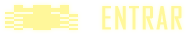
<style>
.page{position:relative;width:193px;height:35px;background:#fff79a}
.page>*{position:absolute;margin:0}
.t1{font:30px "AgencyFB-Reg";letter-spacing:0.04em;color:#fff79a;font-weight:bold}
</style>
<div class="page">
<p class="t1" style="left:102px;top:6px;width:80px;height:24px">ENTRAR</p>
</div>
